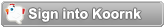
<style>
.page{position:relative;width:165px;height:28px}
.page>*{position:absolute;margin:0}
.t1{font:14px "Arial-BoldMT";color:#ffffff}
</style>
<div class="page">
<p class="t1" style="left:28px;top:8px;width:113px;height:14px">Sign into Koornk</p>
</div>
